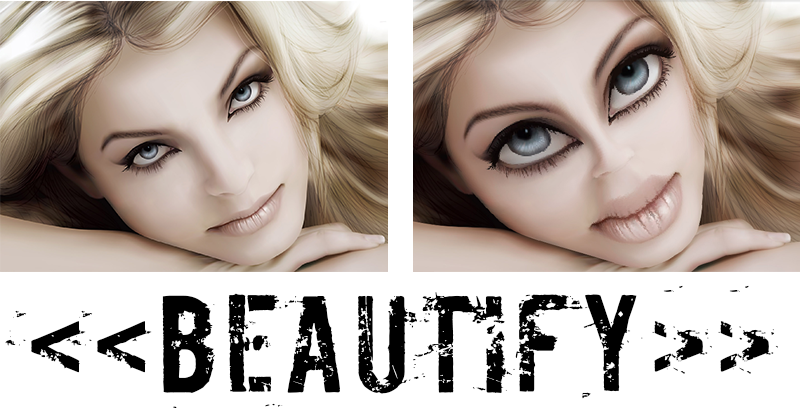
<style>
.page{position:relative;width:800px;height:408px;background:#ffffff}
.page>*{position:absolute;margin:0}
.t1{font:116px "Boycott";letter-spacing:0.026em;color:#000000}
</style>
<div class="page">
<p class="t1" style="left:5px;top:285px;width:773px;height:124px">&lt;&lt;beautify&gt;&gt;</p>
</div>
